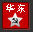
<style>
.page{position:relative;width:33px;height:32px;background:#c50000}
.page>*{position:absolute;margin:0}
.t1{font:10.4px "SimSun";color:#ffffff}
</style>
<div class="page">
<p class="t1" style="left:6px;top:4px;width:19px;height:9px">华东</p>
</div>
